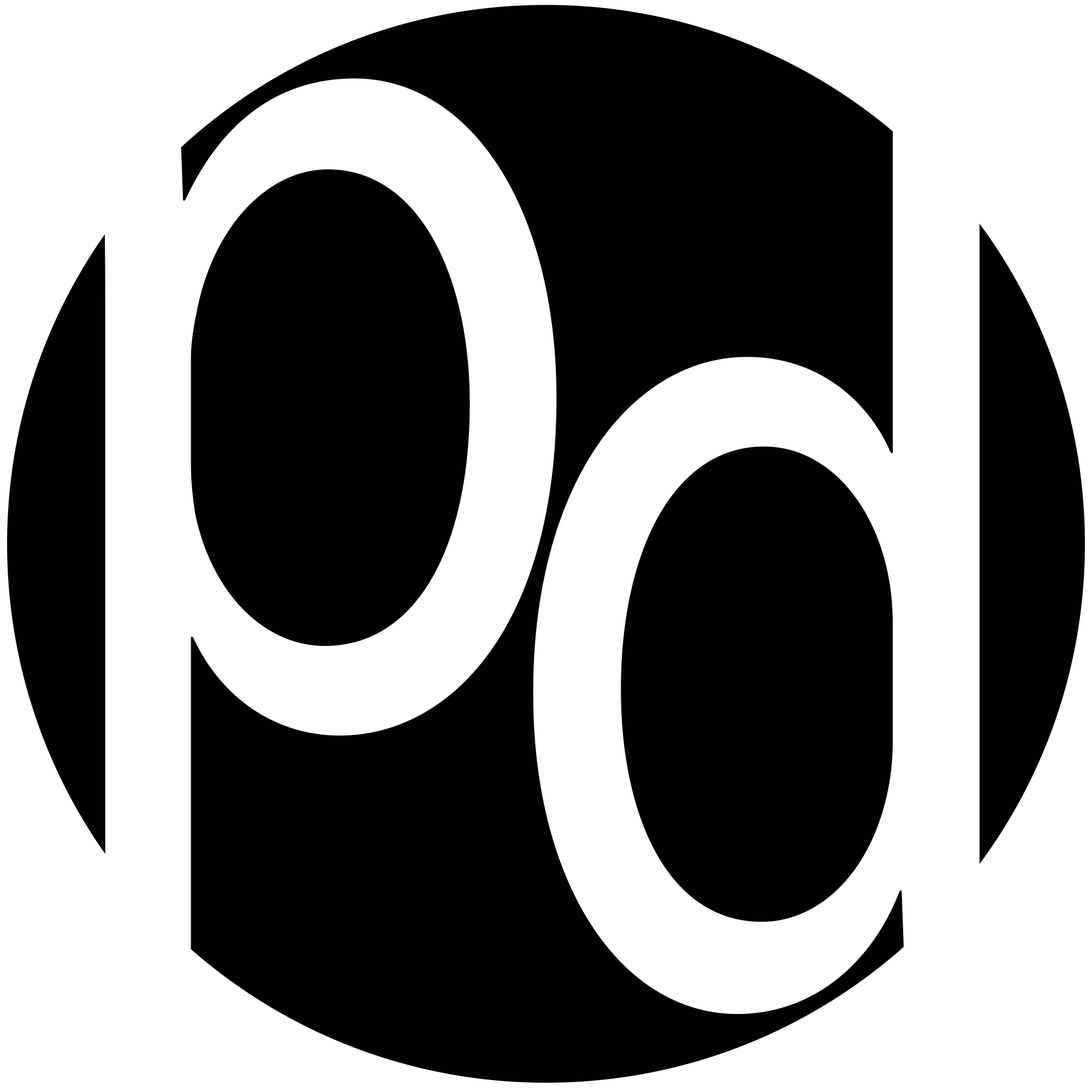
<style>
.page{position:relative;width:1092px;height:1092px;background:#ffffff}
.page>*{position:absolute;margin:0}
.t1{font:1298.6px "MyriadPro-Regular";color:#ffffff;scale:0.76 1}
</style>
<div class="page">
<p class="t1" style="left:533px;top:78px;width:451px;height:936px">d</p>
<p class="t1" style="left:101px;top:78px;width:456px;height:900px">p</p>
</div>
